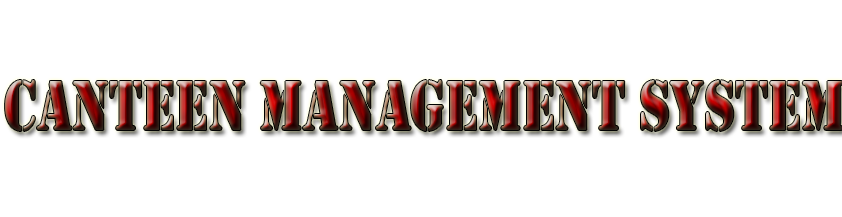
<style>
.page{position:relative;width:842px;height:217px;background:#ffffff}
.page>*{position:absolute;margin:0}
.t1{font:72.8px "Stencil";scale:0.77 1}
</style>
<div class="page">
<p class="t1" style="left:5px;top:80px;width:838px;height:51px">Canteen Management System</p>
</div>
